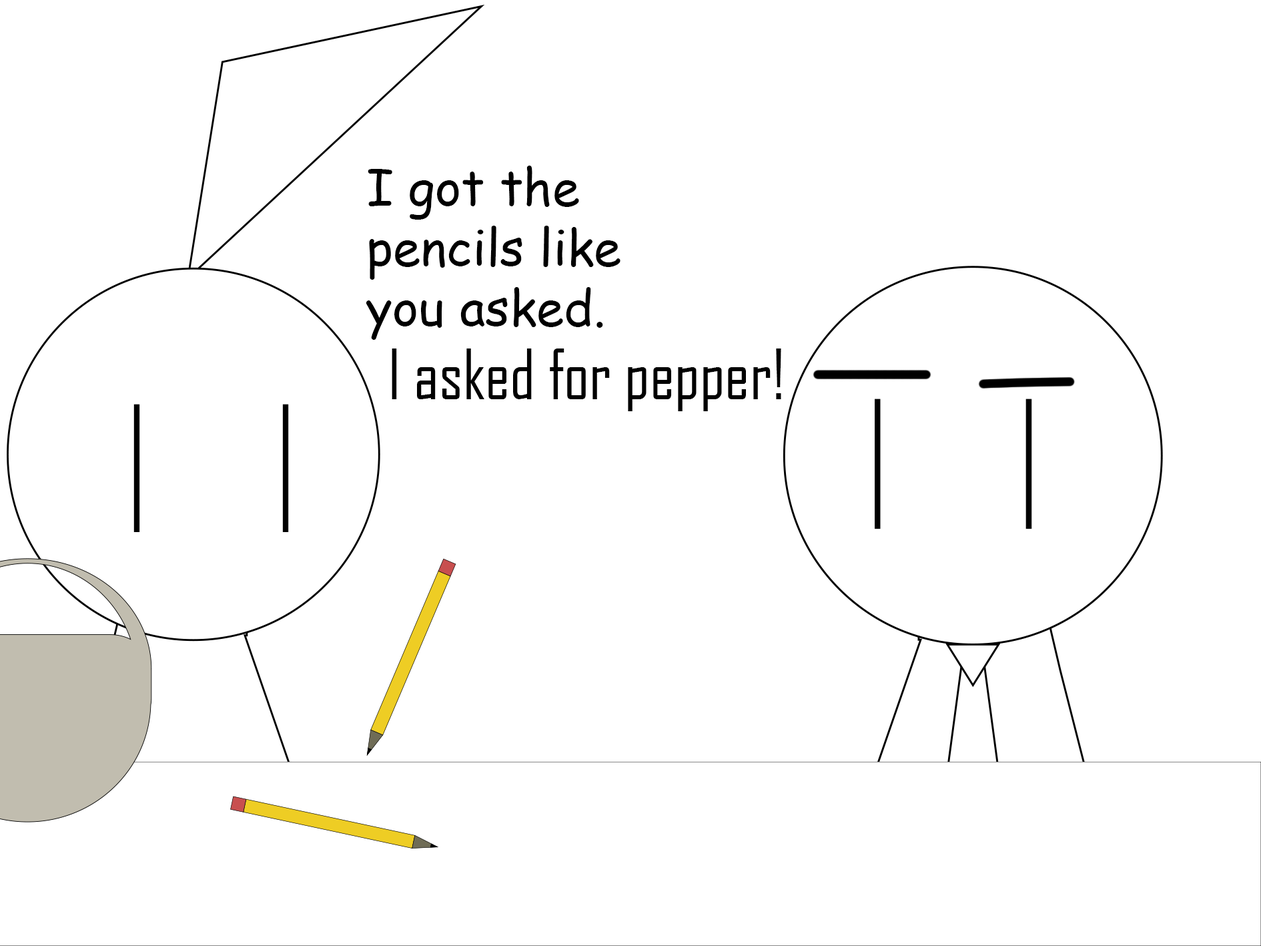
<style>
.page{position:relative;width:1261px;height:946px;background:#ffffff}
.page>*{position:absolute;margin:0}
.t1{font:50px "ComicSansMS";color:#000000}
.t2{font:66.7px "AgencyFB-Reg";color:#000000}
</style>
<div class="page">
<p class="t1" style="left:366px;top:165px;width:255px;height:175px">I got the pencils like you asked.</p>
<p class="t2" style="left:392px;top:348px;width:389px;height:63px">I asked for pepper!</p>
</div>
